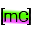
<style>
.page{position:relative;width:32px;height:32px;background:#ffffff}
.page>*{position:absolute;margin:0}
.t1{font:16.7px "Roboto-Light";color:#000000}
.t2{font:20.8px "Roboto-Light";color:#000000}
</style>
<div class="page">
<p class="t1" style="left:4px;top:11px;width:25px;height:11px">m<span class="t2">c</span></p>
</div>
